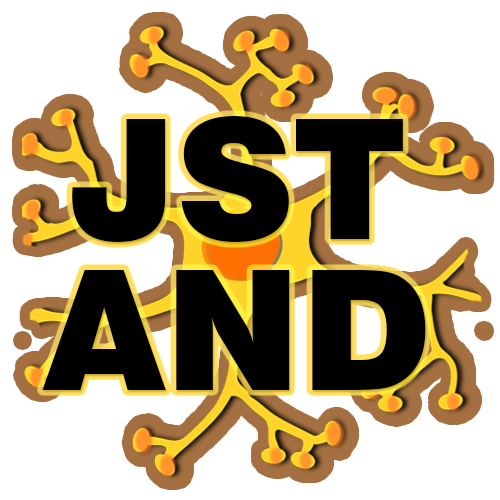
<style>
.page{position:relative;width:500px;height:500px;background:#ffffff}
.page>*{position:absolute;margin:0}
.t1{font:166.7px/460.8px "Swiss721BT-Black";color:#000000}
.t2{font:166.7px/151.1px "Swiss721BT-Black";color:#000000}
</style>
<div class="page">
<p class="t1" style="left:42px;top:116px;width:384px;height:274px;text-align:center">JST<br><span class="t2">AND</span></p>
</div>
